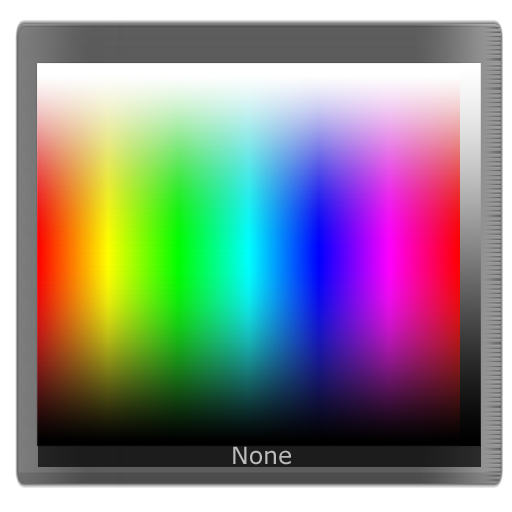
<style>
.page{position:relative;width:512px;height:512px}
.page>*{position:absolute;margin:0}
.t1{font:23.7px "Verdana";color:#bbbbbb}
</style>
<div class="page">
<p class="t1" style="left:233px;top:446px;width:58px;height:19px">None</p>
</div>
